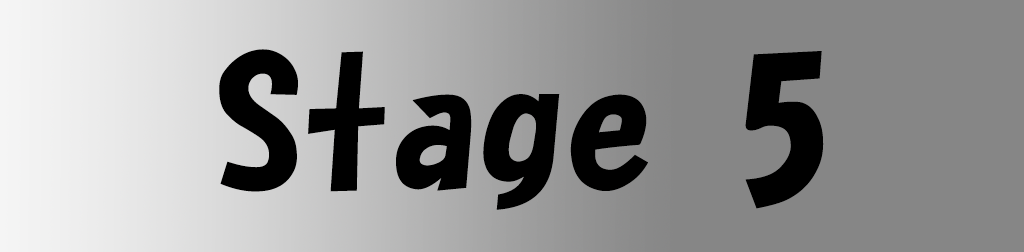
<style>
.page{position:relative;width:1024px;height:252px;background:#868686}
.page>*{position:absolute;margin:0}
.t1{font:175px "HGSoeiKakupoptai";color:#000000}
</style>
<div class="page">
<p class="t1" style="left:219px;top:49px;width:605px;height:161px">Stage 5</p>
</div>
